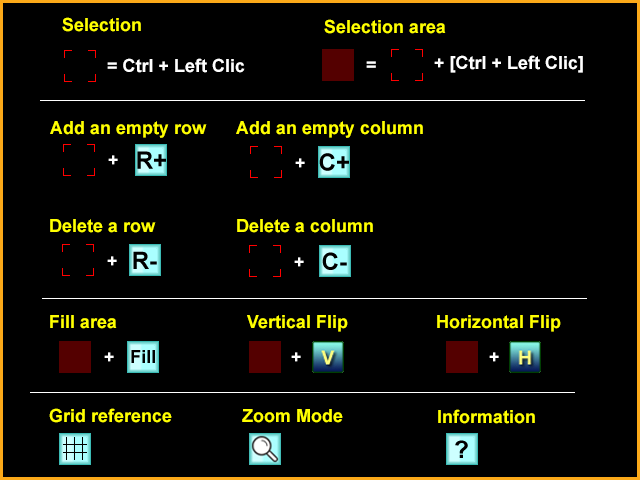
<style>
.page{position:relative;width:640px;height:480px;background:#000000}
.page>*{position:absolute;margin:0}
.t1{font:18px "Arial-BoldMT";color:#ffff00}
.t2{font:18px "Arial-BoldMT";color:#ffffff}
</style>
<div class="page">
<p class="t1" style="left:62px;top:17px;width:79px;height:15px">Selection</p>
<p class="t1" style="left:324px;top:19px;width:122px;height:15px">Selection area</p>
<p class="t2" style="left:107px;top:58px;width:138px;height:15px">= Ctrl + Left Clic</p>
<p class="t2" style="left:366px;top:61px;width:10px;height:7px">=</p>
<p class="t2" style="left:434px;top:55px;width:149px;height:18px">+ [Ctrl + Left Clic]</p>
<p class="t1" style="left:50px;top:121px;width:157px;height:17px">Add an empty row</p>
<p class="t1" style="left:236px;top:121px;width:187px;height:17px">Add an empty column</p>
<p class="t2" style="left:108px;top:155px;width:10px;height:10px">+</p>
<p class="t2" style="left:295px;top:158px;width:10px;height:10px">+</p>
<p class="t1" style="left:50px;top:219px;width:106px;height:14px">Delete a row</p>
<p class="t1" style="left:237px;top:219px;width:136px;height:14px">Delete a column</p>
<p class="t2" style="left:107px;top:256px;width:10px;height:10px">+</p>
<p class="t2" style="left:294px;top:257px;width:10px;height:10px">+</p>
<p class="t1" style="left:50px;top:315px;width:67px;height:14px">Fill area</p>
<p class="t1" style="left:247px;top:315px;width:101px;height:17px">Vertical Flip</p>
<p class="t1" style="left:437px;top:315px;width:124px;height:17px">Horizontal Flip</p>
<p class="t2" style="left:104px;top:352px;width:10px;height:10px">+</p>
<p class="t2" style="left:291px;top:352px;width:10px;height:10px">+</p>
<p class="t2" style="left:489px;top:352px;width:10px;height:10px">+</p>
<p class="t1" style="left:49px;top:408px;width:123px;height:15px">Grid reference</p>
<p class="t1" style="left:242px;top:409px;width:101px;height:14px">Zoom Mode</p>
<p class="t1" style="left:438px;top:409px;width:97px;height:15px">Information</p>
</div>
